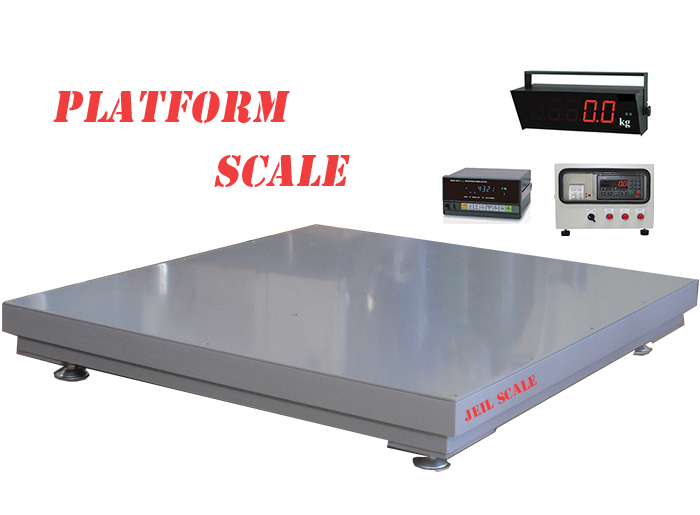
<style>
.page{position:relative;width:700px;height:515px;background:#ffffff}
.page>*{position:absolute;margin:0}
.t1{font:40px/32px "StencilStd";letter-spacing:0.025em;color:#f03e3e;font-style:italic}
.t2{font:13.3px "StencilStd";letter-spacing:0.025em;color:#f03e3e;font-style:italic}
</style>
<div class="page">
<p class="t1" style="left:53px;top:91px;width:297px;height:96px">Platform<br><br>           SCALE</p>
<p class="t2" style="left:465px;top:374px;width:73px;height:48px;rotate:-29deg">JEIL SCALE</p>
</div>
